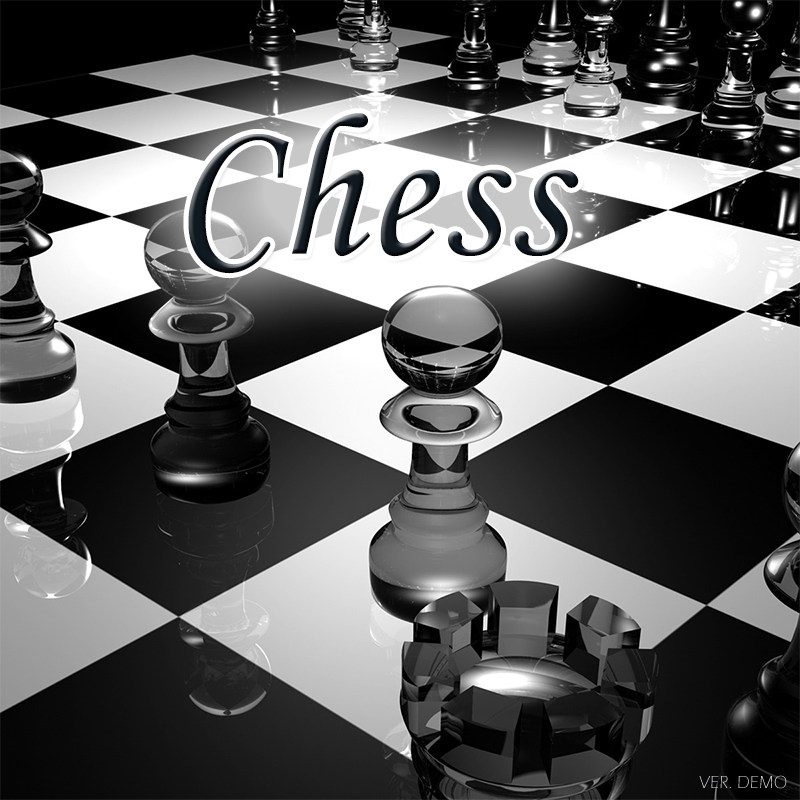
<style>
.page{position:relative;width:800px;height:800px}
.page>*{position:absolute;margin:0}
.t1{font:203.8px "MonotypeCorsiva";letter-spacing:0.025em;color:#101820;scale:0.95 1}
</style>
<div class="page">
<p class="t1" style="left:188px;top:113px;width:391px;height:161px">Chess</p>
</div>
